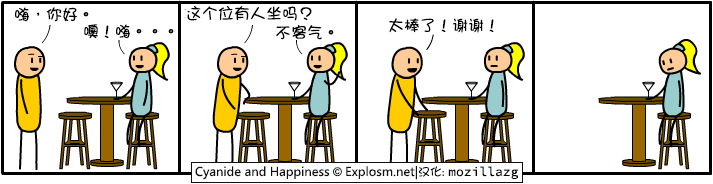
<style>
.page{position:relative;width:713px;height:184px;background:#ffffff}
.page>*{position:absolute;margin:0}
.t1{font:16px "DFGirl";color:#000000}
</style>
<div class="page">
<p class="t1" style="left:187px;top:6px;width:125px;height:15px">这个位有人坐吗？</p>
<p class="t1" style="left:15px;top:7px;width:74px;height:15px">嗨，你好。</p>
<p class="t1" style="left:84px;top:24px;width:90px;height:15px">噢！嗨。。。</p>
<p class="t1" style="left:276px;top:25px;width:58px;height:15px">不客气。</p>
<p class="t1" style="left:389px;top:18px;width:105px;height:15px">太棒了！谢谢！</p>
</div>
